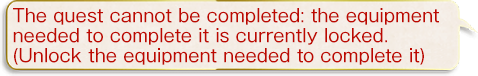
<style>
.page{position:relative;width:478px;height:76px}
.page>*{position:absolute;margin:0}
.t1{font:18px/20px "GothicMB101Pro-Regular";color:#bd0800}
</style>
<div class="page">
<p class="t1" style="left:13px;top:8px;width:426px;height:57px">The quest cannot be completed: the equipment<br>needed to complete it is currently locked.<br>(Unlock the equipment needed to complete it)</p>
</div>
